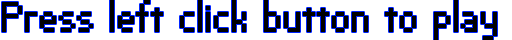
<style>
.page{position:relative;width:512px;height:40px;background:#ffffff}
.page>*{position:absolute;margin:0}
.t1{font:40px "VPPixel-Simplified";color:#000000}
</style>
<div class="page">
<p class="t1" style="left:2px;top:0px;width:495px;height:40px">Press left click button to play</p>
</div>
